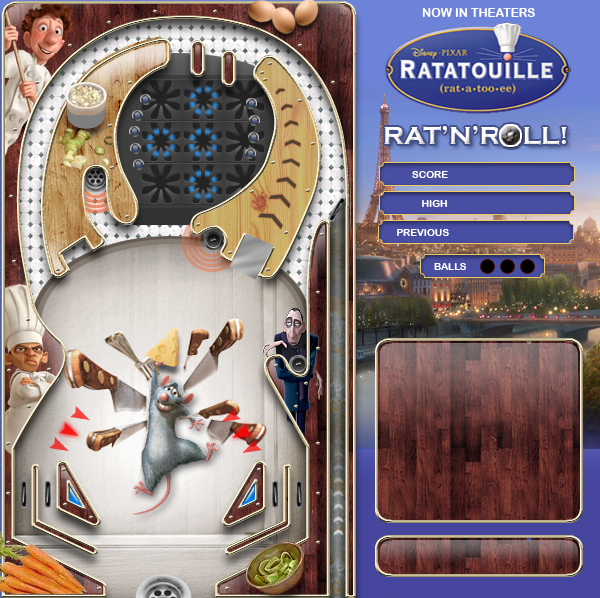
<style>
.page{position:relative;width:600px;height:598px}
.page>*{position:absolute;margin:0}
.t1{font:12px "ArialRoundedMTBold";color:#ffffff}
.t2{font:26px "CopperplateGothic-Bold";color:#fffefe}
.t3{font:10px "ArialRoundedMTBold";color:#ffffff}
</style>
<div class="page">
<p class="t1" style="left:422px;top:8px;width:113px;height:9px">NOW IN THEATERS</p>
<p class="t2" style="left:384px;top:126px;width:183px;height:19px">RAT’N’ROLL!</p>
<p class="t3" style="left:412px;top:171px;width:36px;height:7px">SCORE</p>
<p class="t3" style="left:422px;top:200px;width:25px;height:7px">HIGH</p>
<p class="t3" style="left:397px;top:229px;width:52px;height:7px">PREVIOUS</p>
<p class="t3" style="left:434px;top:263px;width:32px;height:7px">BALLS</p>
</div>
